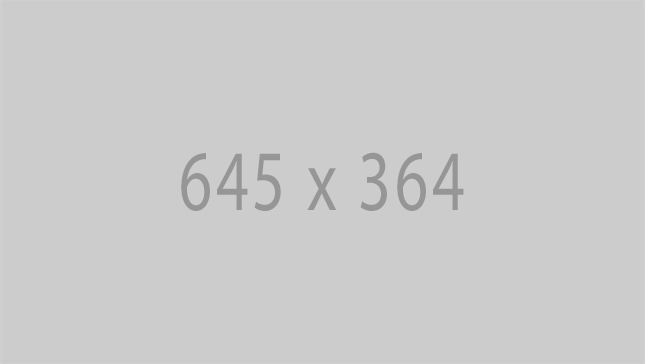
<style>
.page{position:relative;width:645px;height:364px;background:#cccccc}
.page>*{position:absolute;margin:0}
.t1{font:86.4px "MyriadPro-Regular";letter-spacing:0.07em;color:#969696;scale:0.75 1}
</style>
<div class="page">
<p class="t1" style="left:181px;top:152px;width:283px;height:59px">645 x 364</p>
</div>
